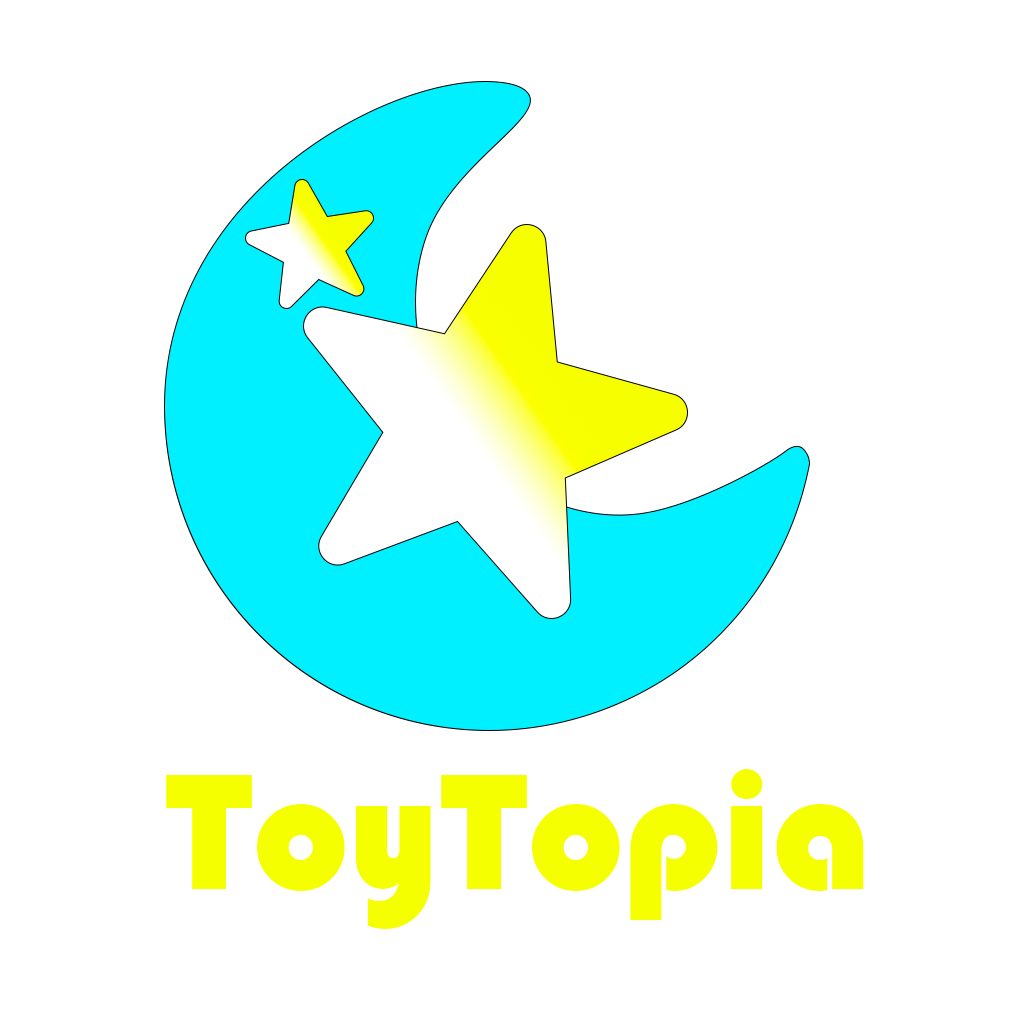
<style>
.page{position:relative;width:1024px;height:1024px;background:#ffffff}
.page>*{position:absolute;margin:0}
.t1{font:170.9px "Bauhaus93";color:#f6ff00}
</style>
<div class="page">
<p class="t1" style="left:166px;top:769px;width:698px;height:160px">ToyTopia</p>
</div>
